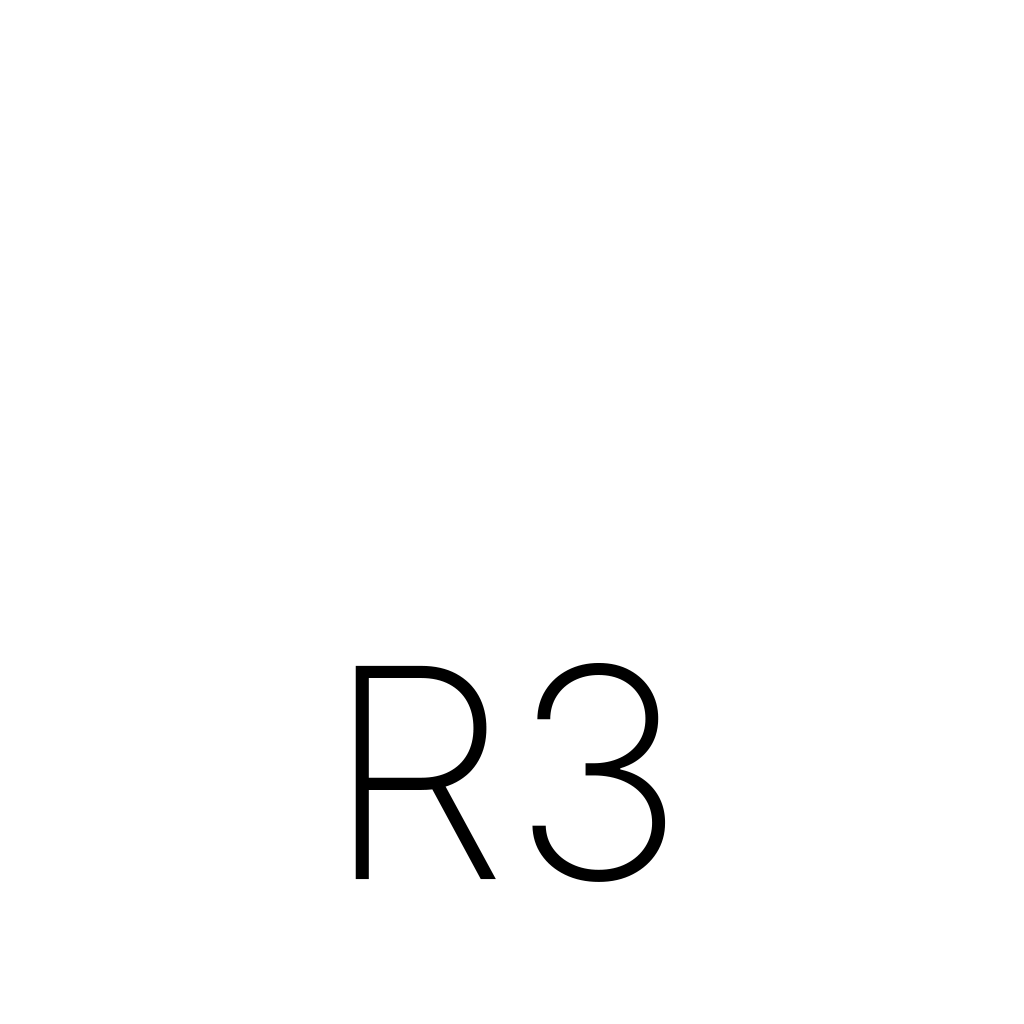
<style>
.page{position:relative;width:1024px;height:1024px;background:#ffffff}
.page>*{position:absolute;margin:0}
.t1{font:292.8px "Inter-ExtraLight";color:#000000}
</style>
<div class="page">
<p class="t1" style="left:355px;top:663px;width:311px;height:219px">R3</p>
</div>
